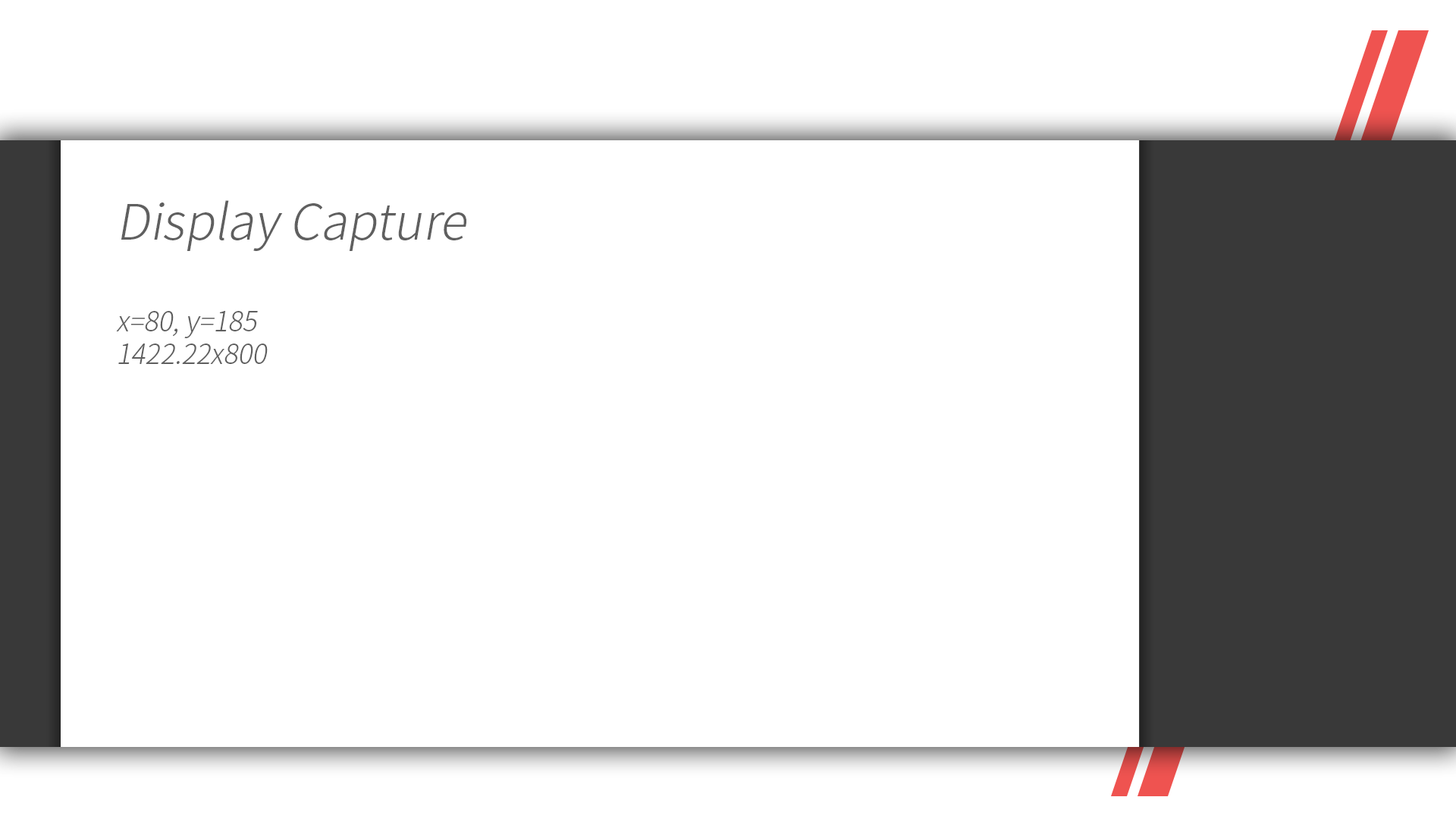
<style>
.page{position:relative;width:1456px;height:819px;background:#ffffff}
.page>*{position:absolute;margin:0}
.t1{font:27.2px "NotoSansCJKkr-Light";color:#5f5f5f;font-style:italic}
.t2{font:49.2px "NotoSansCJKkr-Light";color:#5f5f5f;font-style:italic}
</style>
<div class="page">
<p class="t1" style="left:116px;top:200px;width:350px;height:164px"><span class="t2">Display Capture<br><br></span>x=80, y=185<br>1422.22x800</p>
</div>
